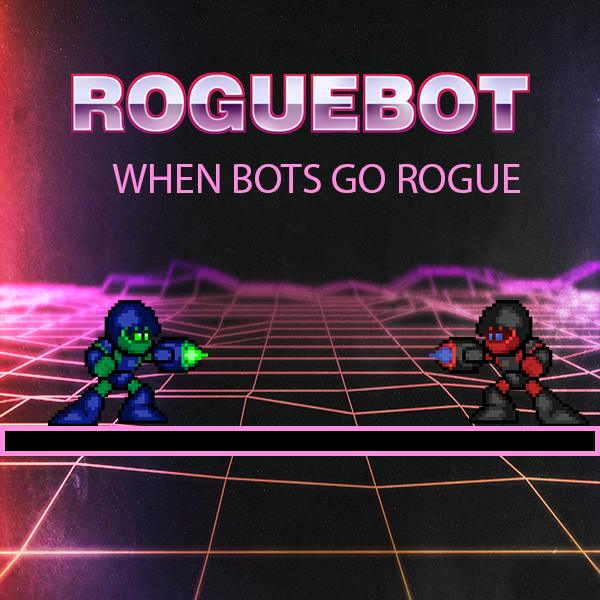
<style>
.page{position:relative;width:600px;height:600px}
.page>*{position:absolute;margin:0}
.t1{font:41.7px "MyriadPro-Regular";color:#ff8ddf}
</style>
<div class="page">
<p class="t1" style="left:112px;top:164px;width:408px;height:29px">WHEN BOTS GO ROGUE</p>
</div>
